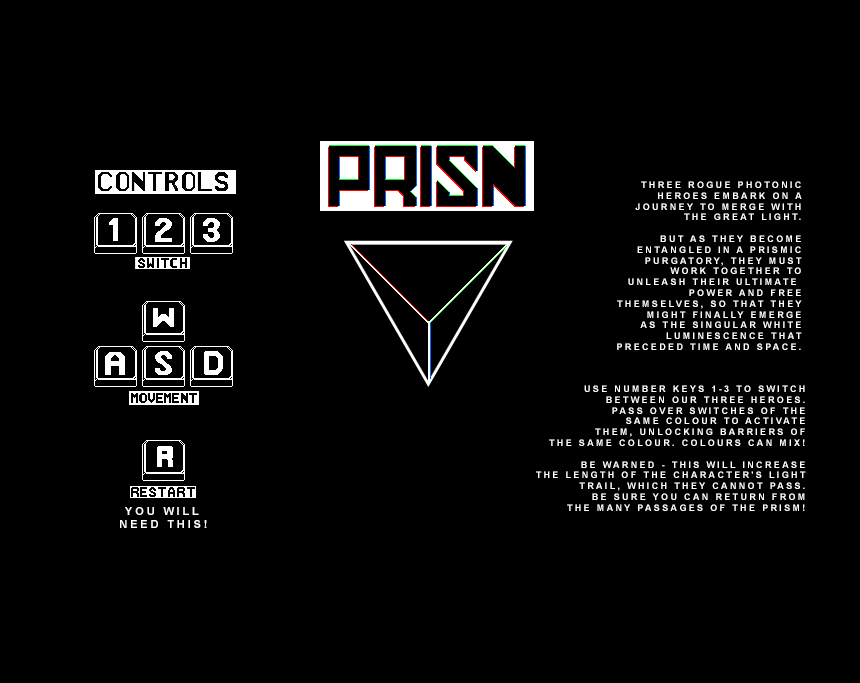
<style>
.page{position:relative;width:860px;height:683px;background:#000000}
.page>*{position:absolute;margin:0}
.t1{font:9px "Arial-BoldMT";letter-spacing:0.26em;color:#ffffff}
.t2{font:11px "Arial-BoldMT";letter-spacing:0.26em;color:#ffffff}
</style>
<div class="page">
<p class="t1" style="left:617px;top:181px;width:185px;height:169px;text-align:right">THREE ROGUE PHOTONIC<br>HEROES EMBARK ON A<br>JOURNEY TO MERGE WITH<br>THE GREAT LIGHT.<br><br>BUT AS THEY BECOME<br>ENTANGLED IN A PRISMIC<br>PURGATORY, THEY MUST<br>WORK TOGETHER TO<br>UNLEASH THEIR ULTIMATE <br>POWER AND FREE<br>THEMSELVES, SO THAT THEY<br>MIGHT FINALLY EMERGE<br>AS THE SINGULAR WHITE<br>LUMINESCENCE THAT<br>PRECEDED TIME AND SPACE.</p>
<p class="t1" style="left:536px;top:385px;width:270px;height:126px;text-align:right">USE NUMBER KEYS 1-3 TO SWITCH<br>BETWEEN OUR THREE HEROES.<br>PASS OVER SWITCHES OF THE<br>SAME COLOUR TO ACTIVATE<br>THEM, UNLOCKING BARRIERS OF<br>THE SAME COLOUR. COLOURS CAN MIX!<br><br>BE WARNED - THIS WILL INCREASE<br>THE LENGTH OF THE CHARACTER'S LIGHT<br>TRAIL, WHICH THEY CANNOT PASS.<br>BE SURE YOU CAN RETURN FROM<br>THE MANY PASSAGES OF THE PRISM!</p>
<p class="t2" style="left:120px;top:507px;width:87px;height:21px">YOU WILL<br>NEED THIS!</p>
</div>
